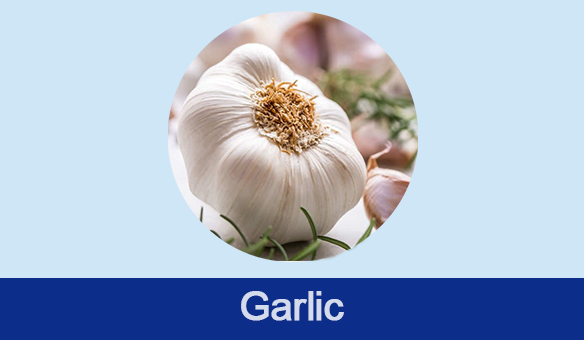
<style>
.page{position:relative;width:584px;height:340px;background:#cee6f6}
.page>*{position:absolute;margin:0}
.t1{font:40.2px "ArialMT";letter-spacing:-0.03em;color:#d4dbed;font-weight:bold}
</style>
<div class="page">
<p class="t1" style="left:241px;top:291px;width:103px;height:30px">Garlic</p>
</div>
